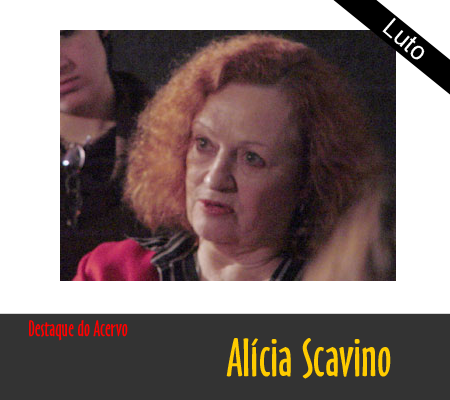
<style>
.page{position:relative;width:450px;height:400px;background:#ffffff}
.page>*{position:absolute;margin:0}
.t1{font:25px "Small Fonts";color:#ffffff}
.t2{font:20.8px "OzHandicraftBT-Roman";color:#ff0000}
.t3{font:50px "OzHandicraftBT-Roman";color:#ffcc00}
</style>
<div class="page">
<p class="t1" style="left:382px;top:17px;width:43px;height:43px;rotate:41deg">Luto</p>
<p class="t2" style="left:29px;top:320px;width:99px;height:21px">Destaque do Acervo</p>
<p class="t3" style="left:226px;top:338px;width:165px;height:41px">Alícia Scavino</p>
</div>
